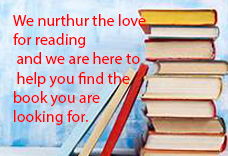
<style>
.page{position:relative;width:228px;height:156px}
.page>*{position:absolute;margin:0}
.t1{font:16px "MyriadPro-Regular";color:#ff0000}
</style>
<div class="page">
<p class="t1" style="left:13px;top:14px;width:133px;height:111px">We nurthur the love <br>for reading<br> and we are here to<br> help you find the <br>book you are <br>looking for.</p>
</div>
